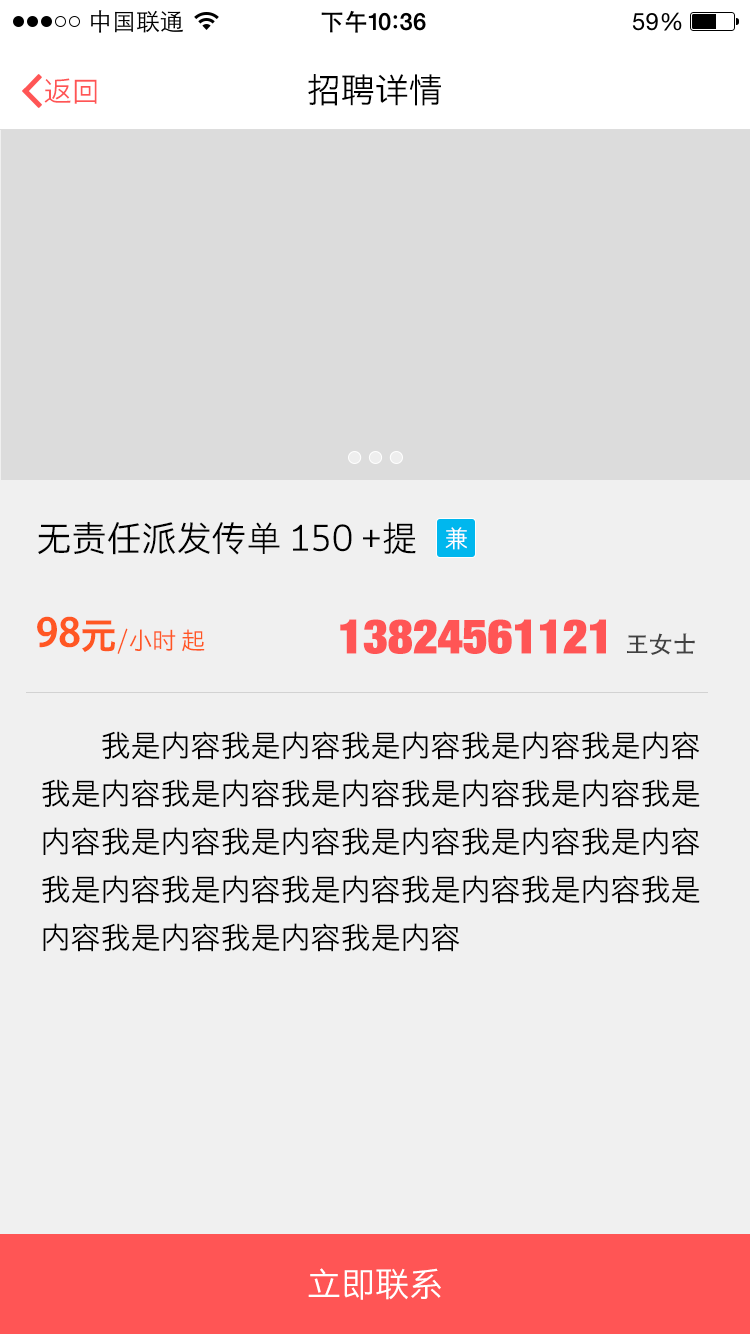
<style>
.page{position:relative;width:750px;height:1334px;background:#f0f0f0}
.page>*{position:absolute;margin:0}
.t1{font:28px "STHeitiSC-Light";color:#ff5555}
.t2{font:34px "STHeitiSC-Light";color:#000000}
.t3{font:35px "STHeitiSC-Light";color:#000000}
.t4{font:24px "STHeitiSC-Light";color:#ffffff}
.t5{font:24px "STHeitiSC-Light";color:#ff5723}
.t6{font:48px "STHeitiSC-Medium";color:#ff5723}
.t7{font:36px "STHeitiSC-Medium";color:#ff5723}
.t8{font:48px "HelveticaNeueLT-ExtBlackCond";color:#ff5555}
.t9{font:24px "AdobeHeitiStd-Regular";color:#424242}
.t10{font:30px/48px "STHeitiSC-Light";color:#000000}
.t11{font:34px "STHeitiSC-Light";color:#ffffff}
</style>
<div class="page">
<p class="t1" style="left:44px;top:78px;width:53px;height:26px">返回</p>
<p class="t2" style="left:308px;top:74px;width:133px;height:32px">招聘详情</p>
<p class="t3" style="left:38px;top:522px;width:378px;height:33px">无责任派发传单 150 +提</p>
<p class="t4" style="left:445px;top:527px;width:22px;height:23px">兼</p>
<p class="t5" style="left:37px;top:616px;width:168px;height:38px"><span class="t6">98</span><span class="t7">元</span>/小时 起</p>
<p class="t8" style="left:340px;top:619px;width:355px;height:36px">13824561121 <span class="t9">王女士</span></p>
<p class="t10" style="left:42px;top:731px;width:658px;height:221px">我是内容我是内容我是内容我是内容我是内容<br>我是内容我是内容我是内容我是内容我是内容我是<br>内容我是内容我是内容我是内容我是内容我是内容<br>我是内容我是内容我是内容我是内容我是内容我是<br>内容我是内容我是内容我是内容</p>
<p class="t11" style="left:308px;top:1268px;width:133px;height:32px">立即联系</p>
</div>
